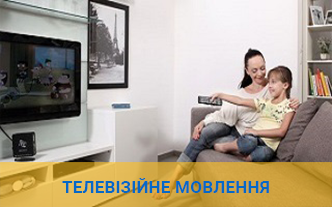
<style>
.page{position:relative;width:332px;height:207px}
.page>*{position:absolute;margin:0}
.t1{font:17.3px "Roboto-Bold";color:#0568c8}
</style>
<div class="page">
<p class="t1" style="left:62px;top:178px;width:207px;height:15px">ТЕЛЕВІЗІЙНЕ МОВЛЕННЯ</p>
</div>
